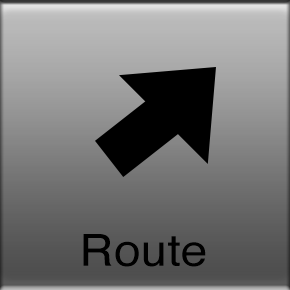
<style>
.page{position:relative;width:290px;height:290px}
.page>*{position:absolute;margin:0}
.t1{font:44px "Helvetica";color:#000000;scale:1.09 1}
</style>
<div class="page">
<p class="t1" style="left:83px;top:234px;width:123px;height:33px">Route</p>
</div>
